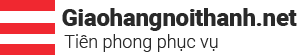
<style>
.page{position:relative;width:300px;height:55px;background:#ffffff}
.page>*{position:absolute;margin:0}
.t1{font:24px "Roboto-Black";letter-spacing:-0.01em;color:#2a2a2a}
.t2{font:18px "Roboto-Light";color:#2a2a2a}
</style>
<div class="page">
<p class="t1" style="left:62px;top:8px;width:235px;height:23px">Giaohangnoithanh.net</p>
<p class="t2" style="left:64px;top:34px;width:154px;height:18px">Tiên phong phục vụ</p>
</div>
